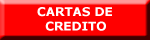
<style>
.page{position:relative;width:150px;height:40px;background:#ff0000}
.page>*{position:absolute;margin:0}
.t1{font:12px "Verdana-Bold";color:#ffffff}
</style>
<div class="page">
<p class="t1" style="left:37px;top:7px;width:75px;height:24px">CARTAS DE<br>  CREDITO</p>
</div>
